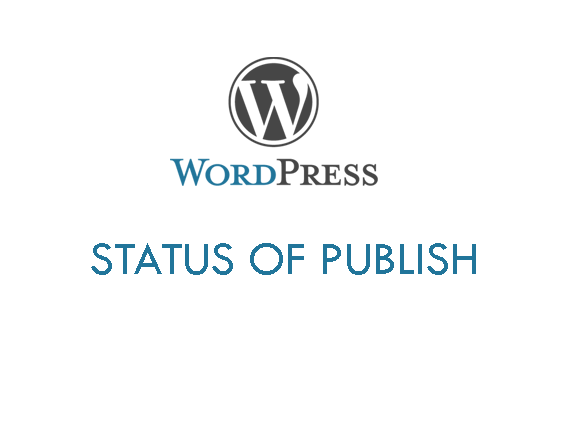
<style>
.page{position:relative;width:562px;height:437px;background:#ffffff}
.page>*{position:absolute;margin:0}
.t1{font:48px "TwCenMT-Regular";color:#21759a}
</style>
<div class="page">
<p class="t1" style="left:91px;top:243px;width:385px;height:32px">STATUS OF PUBLISH</p>
</div>
